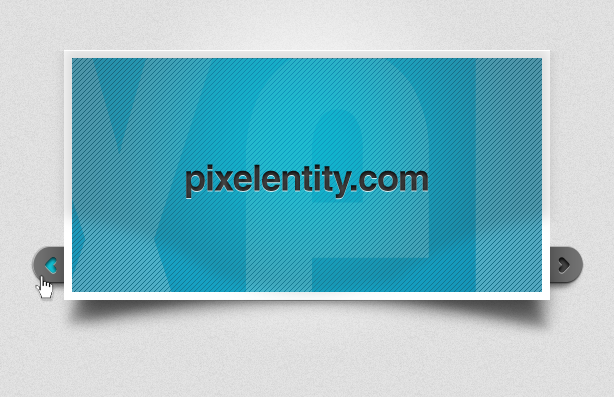
<style>
.page{position:relative;width:614px;height:397px}
.page>*{position:absolute;margin:0}
.t1{font:36px "Helvetica-Bold";letter-spacing:-0.025em;color:#303030}
</style>
<div class="page">
<p class="t1" style="left:186px;top:164px;width:242px;height:35px">pixelentity.com</p>
</div>
